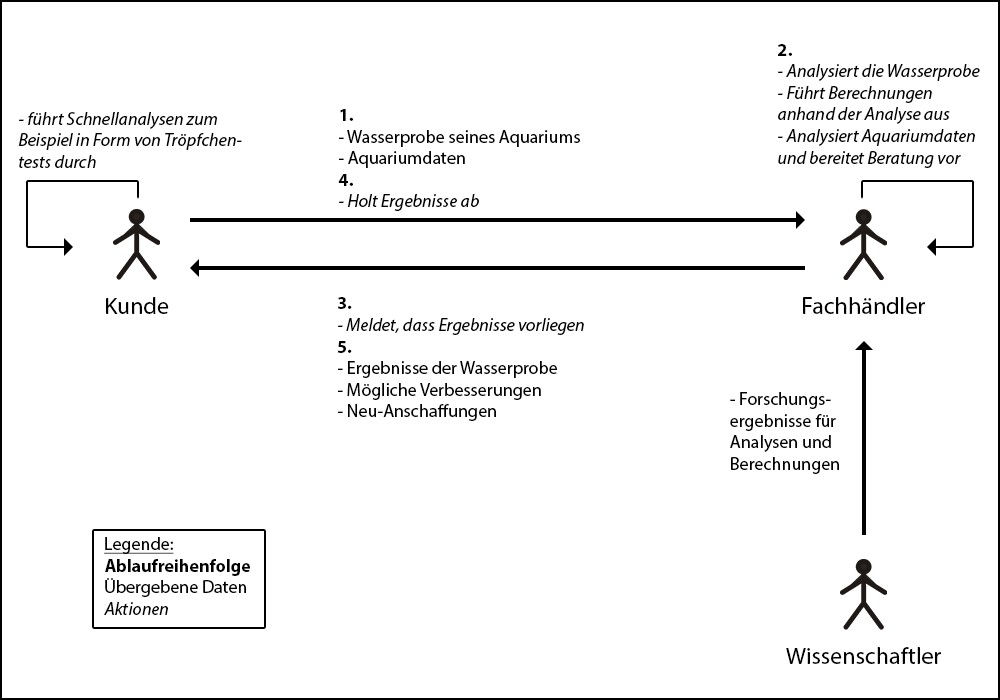
<style>
.page{position:relative;width:1000px;height:700px;background:#ffffff}
.page>*{position:absolute;margin:0}
.t1{font:18px "MyriadPro-It";color:#000000}
.t2{font:18px "MyriadPro-Bold";color:#000000}
.t3{font:18px "MyriadPro-Regular";color:#000000}
.t4{font:23.9px "MyriadPro-Regular";color:#000000}
.t5{font:24px "MyriadPro-Regular";color:#000000}
.t6{font:18px "MyriadPro-Regular";color:#000000;text-decoration:underline}
</style>
<div class="page">
<p class="t1" style="left:778px;top:44px;width:202px;height:124px"><span class="t2">2.<br></span>- Analysiert die Wasserprobe<br>- Führt Berechnungen<br>anhand der Analyse aus<br>- Analysiert Aquariumdaten <br>und bereitet Beratung vor</p>
<p class="t1" style="left:18px;top:112px;width:224px;height:56px">- führt Schnellanalysen zum<br>Beispiel in Form von Tröpfchen-<br>tests durch</p>
<p class="t3" style="left:338px;top:109px;width:242px;height:102px"><span class="t2">1. <br></span>- Wasserprobe seines Aquariums<br>- Aquariumdaten<br><span class="t2">4.<br></span><span class="t1">- Holt Ergebnisse ab</span></p>
<p class="t4" style="left:106px;top:297px;width:63px;height:17px">Kunde</p>
<p class="t3" style="left:337px;top:297px;width:247px;height:124px"><span class="t2">3.<br></span><span class="t1">- Meldet, dass Ergebnisse vorliegen<br></span><span class="t2">5.<br></span>- Ergebnisse der Wasserprobe<br>- Mögliche Verbesserungen<br>- Neu-Anschaffungen</p>
<p class="t5" style="left:803px;top:297px;width:122px;height:17px">Fachhändler</p>
<p class="t3" style="left:730px;top:392px;width:109px;height:82px">- Forschungs-<br>ergebnisse für <br>Analysen und <br>Berechnungen</p>
<p class="t2" style="left:104px;top:537px;width:146px;height:78px"><span class="t6">Legende:<br></span>Ablaufreihenfolge<br><span class="t3">Übergebene Daten<br></span><span class="t1">Aktionen</span></p>
<p class="t4" style="left:786px;top:647px;width:155px;height:17px">Wissenschaftler</p>
</div>
